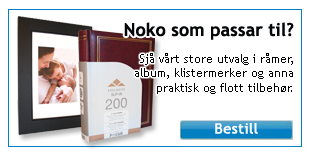
<style>
.page{position:relative;width:309px;height:155px;background:#ffffff}
.page>*{position:absolute;margin:0}
.t1{font:18px "TrebuchetMS-Bold";color:#040608}
.t2{font:12px "TrebuchetMS";color:#000000}
.t3{font:14px "TrebuchetMS";color:#fafbf8;font-weight:bold;scale:1.06 1}
</style>
<div class="page">
<p class="t1" style="left:124px;top:22px;width:170px;height:18px">Noko som passar til?</p>
<p class="t2" style="left:135px;top:53px;width:158px;height:41px;text-align:right">Sjå vårt store utvalg i råmer,<br>album, klistermerker og anna<br>praktisk og flott tilbehør.</p>
<p class="t3" style="left:215px;top:123px;width:43px;height:11px">Bestill</p>
</div>
